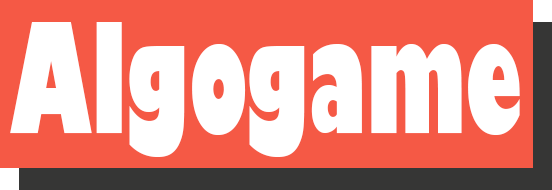
<style>
.page{position:relative;width:552px;height:190px;background:#f55945}
.page>*{position:absolute;margin:0}
.t1{font:149.3px "GillSans-UltraBoldCondensed";color:#ffffff;scale:0.81 1}
</style>
<div class="page">
<p class="t1" style="left:10px;top:22px;width:510px;height:135px">Algogame</p>
</div>
